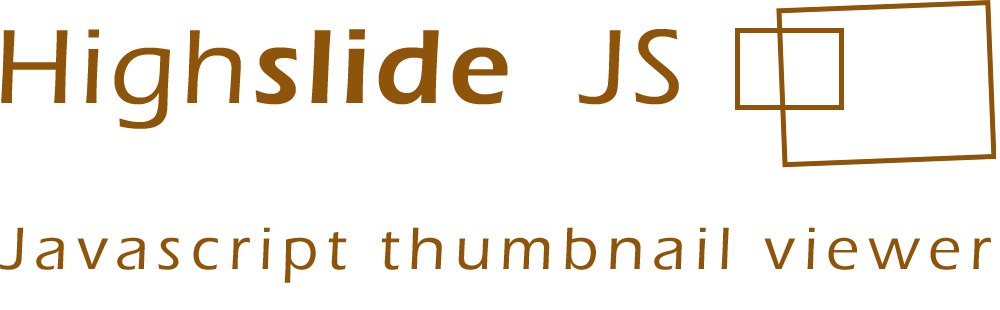
<style>
.page{position:relative;width:1000px;height:310px;background:#ffffff}
.page>*{position:absolute;margin:0}
.t1{font:109.2px "ErasITC-Demi";letter-spacing:0.05em;color:#8e550a}
.t2{font:109.2px "ErasITC-Medium";letter-spacing:0.05em;color:#8e550a}
.t3{font:61.8px "ErasITC-Medium";letter-spacing:0.142em;color:#8e550a}
</style>
<div class="page">
<p class="t1" style="left:1px;top:29px;width:678px;height:100px"><span class="t2">High</span>slide  <span class="t2">JS</span></p>
<p class="t3" style="left:0px;top:227px;width:991px;height:56px">Javascript thumbnail viewer</p>
</div>
